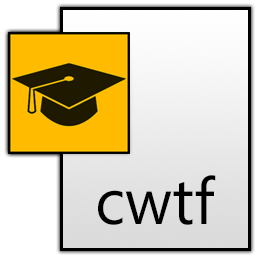
<style>
.page{position:relative;width:256px;height:256px}
.page>*{position:absolute;margin:0}
.t1{font:65px "SegoeUI";color:#000000}
</style>
<div class="page">
<p class="t1" style="left:98px;top:175px;width:118px;height:50px">cwtf</p>
</div>
